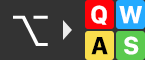
<style>
.page{position:relative;width:145px;height:60px;background:#333333}
.page>*{position:absolute;margin:0}
.t1{font:26.1px "SFCompactText-Bold";letter-spacing:0.059em;color:#ffffff}
.t2{font:41.7px "LucidaGrande";letter-spacing:0.059em;color:#ffffff}
.t3{font:26.1px "SFCompactText-Bold";letter-spacing:0.059em;color:#000000}
</style>
<div class="page">
<p class="t1" style="left:91px;top:5px;width:16px;height:20px">Q</p>
<p class="t1" style="left:119px;top:5px;width:23px;height:19px">W</p>
<p class="t2" style="left:13px;top:15px;width:35px;height:31px">⌥</p>
<p class="t3" style="left:91px;top:37px;width:17px;height:18px">A</p>
<p class="t1" style="left:124px;top:36px;width:15px;height:19px">S</p>
</div>
